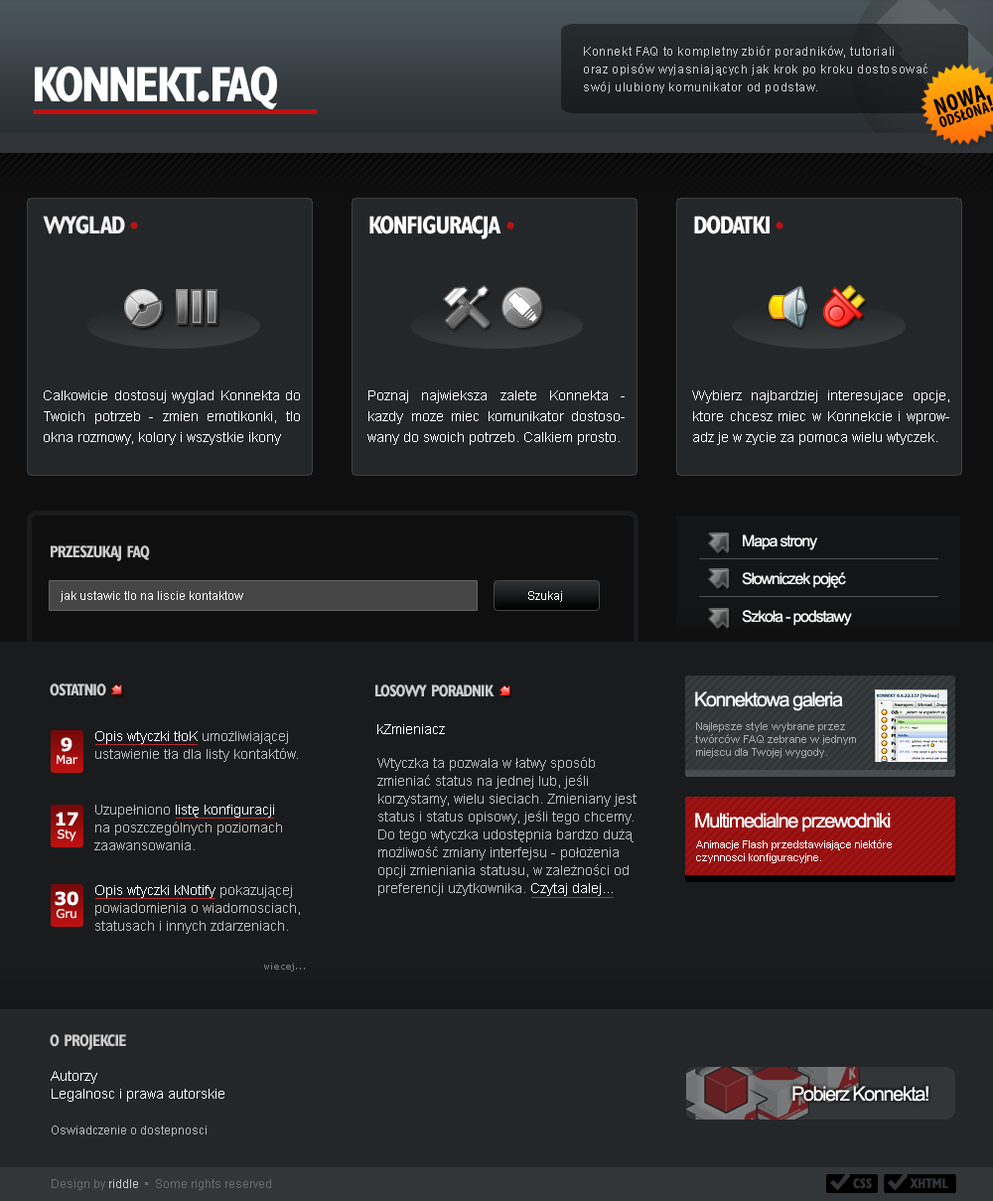
<style>
.page{position:relative;width:993px;height:1201px;background:#23272a}
.page>*{position:absolute;margin:0}
.t1{font:11.9px/17.9px "ArialMT";letter-spacing:0.05em;color:#cecece}
.t2{font:71.5px "Humanist521BT-BoldCondensed";letter-spacing:-0.035em;color:#ffffff;font-variant:small-caps}
.t3{font:22.8px/12.9px "MyriadPro-BoldCond";letter-spacing:0.007em;color:#000000;font-variant:small-caps}
.t4{font:23.8px/12.9px "MyriadPro-BoldCond";letter-spacing:0.025em;color:#000000;font-variant:small-caps}
.t5{font:35.8px "Humanist521BT-BoldCondensed";letter-spacing:-0.035em;color:#f1f1f1;font-variant:small-caps}
.t6{font:23.8px "Humanist521BT-BoldCondensed";letter-spacing:-0.035em;color:#be1111;font-variant:small-caps}
.t7{font:35.8px "Humanist521BT-BoldCondensed";letter-spacing:-0.035em;color:#ffffff;font-variant:small-caps}
.t8{font:13.9px/20.9px "ArialMT";color:#ffffff}
.t9{font:23.8px "Humanist521BT-BoldCondensed";letter-spacing:-0.035em;color:#cccccc;font-variant:small-caps}
.t10{font:15.9px "ArialMT";letter-spacing:-0.075em;color:#ffffff}
.t11{font:11.9px "ArialMT";color:#ffffff}
.t12{font:19.9px "ArialMT";letter-spacing:-0.075em;color:#ffffff}
.t13{font:13.9px "ArialMT";color:#ffffff}
.t14{font:10.9px "ArialMT";color:#aaaaaa}
.t15{font:17.9px "Verdana-Bold";letter-spacing:-0.025em;color:#ffffff}
.t16{font:13.9px/17.9px "ArialMT";color:#c0c0c0}
.t17{font:13.9px/17.9px "ArialMT";color:#ffffff}
.t18{font:11.9px "Verdana";letter-spacing:-0.025em;color:#ffffff}
.t19{font:10.9px "ArialMT";color:#ffffff}
.t20{font:9.9px "Verdana";color:#7c7c7c}
.t21{font:11.9px/17.9px "ArialMT";color:#bababa}
.t22{font:11.9px "ArialMT";color:#6c6c6c}
.t23{font:11.9px "ArialMT";color:#c8c8c8}
.t24{font:13.9px "Humanist521BT-BoldCondensed";color:#333639}
</style>
<div class="page">
<p class="t1" style="left:584px;top:46px;width:344px;height:47px">Konnekt FAQ to kompletny zbiór poradników, tutoriali <br>oraz opisów wyjasniających jak krok po kroku dostosować<br>swój ulubiony komunikator od podstaw.</p>
<p class="t2" style="left:35px;top:66px;width:167px;height:36px">konnekt</p>
<p class="t2" style="left:198px;top:66px;width:79px;height:43px">.faq</p>
<p class="t3" style="left:934px;top:84px;width:59px;height:43px;rotate:-18deg"><span class="t4">NOWA<br></span>odsłona<span class="t4">!</span></p>
<p class="t5" style="left:43px;top:216px;width:82px;height:18px">wyglad</p>
<p class="t6" style="left:130px;top:221px;width:8px;height:8px">•</p>
<p class="t7" style="left:369px;top:216px;width:133px;height:23px">konfiguracja</p>
<p class="t6" style="left:506px;top:221px;width:8px;height:8px">•</p>
<p class="t7" style="left:694px;top:216px;width:76px;height:18px">dodatki</p>
<p class="t6" style="left:776px;top:221px;width:8px;height:8px">•</p>
<p class="t8" style="left:44px;top:390px;width:256px;height:55px;text-align:justify">Calkowicie dostosuj wyglad Konnekta do Twoich potrzeb - zmien emotikonki, tlo okna rozmowy, kolory i wszystkie ikony</p>
<p class="t8" style="left:367px;top:390px;width:258px;height:55px;text-align:justify">Poznaj najwieksza zalete Konnekta - kazdy moze miec komunikator dostosowany do swoich potrzeb. Calkiem prosto.</p>
<p class="t8" style="left:692px;top:390px;width:257px;height:55px;text-align:justify">Wybierz najbardziej interesujace opcje, ktore chcesz miec w Konnekcie i wprowadz je w zycie za pomoca wielu wtyczek.</p>
<p class="t9" style="left:51px;top:545px;width:99px;height:16px">przeszukaj faq</p>
<p class="t10" style="left:743px;top:534px;width:74px;height:16px">Mapa strony</p>
<p class="t10" style="left:742px;top:572px;width:104px;height:16px">Słowniczek pojęć</p>
<p class="t11" style="left:61px;top:591px;width:182px;height:11px">jak ustawic tlo na liscie kontaktow</p>
<p class="t11" style="left:528px;top:591px;width:34px;height:11px">Szukaj</p>
<p class="t10" style="left:742px;top:610px;width:110px;height:16px">Szkoła - podstawy</p>
<p class="t9" style="left:50px;top:683px;width:56px;height:13px">ostatnio</p>
<p class="t9" style="left:375px;top:684px;width:120px;height:13px">losowy poradnik</p>
<p class="t12" style="left:695px;top:691px;width:148px;height:20px">Konnektowa galeria</p>
<p class="t13" style="left:377px;top:724px;width:68px;height:10px">kZmieniacz</p>
<p class="t14" style="left:695px;top:722px;width:161px;height:36px">Najlepsze style wybrane przez <br>twórców FAQ zebrane w jednym<br>miejscu dla Twojej wygody.</p>
<p class="t15" style="left:61px;top:737px;width:11px;height:15px">9</p>
<p class="t16" style="left:95px;top:731px;width:203px;height:31px"><span class="t17">Opis wtyczki tłoK </span>umożliwiającej<br>ustawienie tła dla listy kontaktów.</p>
<p class="t18" style="left:57px;top:755px;width:20px;height:10px">Mar</p>
<p class="t16" style="left:377px;top:757px;width:260px;height:139px">Wtyczka ta pozwala w łatwy sposób<br>zmieniać status na jednej lub, jeśli<br>korzystamy, wielu sieciach. Zmieniany jest<br>status i status opisowy, jeśli tego chcemy.<br>Do tego wtyczka udostępnia bardzo dużą<br>możliwość zmiany interfejsu - położenia<br>opcji zmieniania statusu, w zależności od<br>preferencji użytkownika. <span class="t17">Czytaj dalej...</span></p>
<p class="t16" style="left:94px;top:804px;width:188px;height:46px">Uzupełniono <span class="t17">listę konfiguracji<br></span>na poszczególnych poziomach<br>zaawansowania.</p>
<p class="t15" style="left:56px;top:811px;width:22px;height:14px">17</p>
<p class="t12" style="left:695px;top:812px;width:196px;height:19px">Multimedialne przewodniki</p>
<p class="t18" style="left:58px;top:829px;width:18px;height:12px">Sty</p>
<p class="t19" style="left:696px;top:839px;width:196px;height:24px">Animacje Flash przedstawiające niektóre<br>czynnosci konfiguracyjne.</p>
<p class="t15" style="left:55px;top:891px;width:23px;height:15px">30</p>
<p class="t16" style="left:95px;top:885px;width:205px;height:49px"><span class="t17">Opis wtyczki kNotify</span> pokazującej<br>powiadomienia o wiadomosciach,<br>statusach i innych zdarzeniach.</p>
<p class="t18" style="left:56px;top:909px;width:20px;height:10px">Gru</p>
<p class="t20" style="left:264px;top:962px;width:41px;height:9px">wiecej...</p>
<p class="t9" style="left:50px;top:1034px;width:76px;height:16px">o projekcie</p>
<p class="t17" style="left:51px;top:1071px;width:173px;height:65px">Autorzy<br>Legalnosc i prawa autorskie<br><br><span class="t21">Oswiadczenie o dostepnosci</span></p>
<p class="t12" style="left:793px;top:1085px;width:136px;height:16px">Pobierz Konnekta!</p>
<p class="t22" style="left:52px;top:1179px;width:219px;height:11px">Design by <span class="t23">riddle</span>  •  Some rights reserved</p>
<p class="t24" style="left:853px;top:1178px;width:19px;height:11px">CSS</p>
<p class="t24" style="left:910px;top:1178px;width:38px;height:10px">XHTML</p>
</div>
